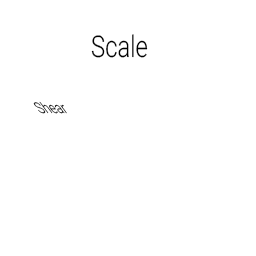
<style>
.page{position:relative;width:256px;height:256px;background:#ffffff}
.page>*{position:absolute;margin:0}
.t1{font:30px "Roboto-Light";color:#000000;scale:0.79 1}
.t2{font:18.2px "Roboto-Light";scale:0.64 1}
</style>
<div class="page">
<p class="t1" style="left:91px;top:34px;width:57px;height:24px">Scale</p>
<p class="t2" style="left:33px;top:101px;width:34px;height:13px">Shear</p>
</div>
